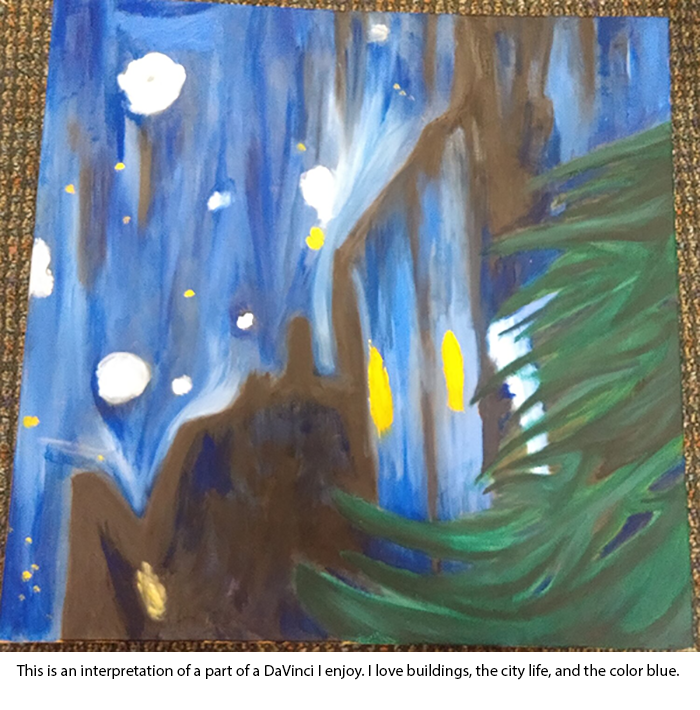
<style>
.page{position:relative;width:700px;height:710px}
.page>*{position:absolute;margin:0}
.t1{font:16px "MyriadPro-Regular";color:#000000}
</style>
<div class="page">
<p class="t1" style="left:16px;top:664px;width:663px;height:16px">This is an interpretation of a part of a DaVinci I enjoy. I love buildings, the city life, and the color blue.</p>
</div>
